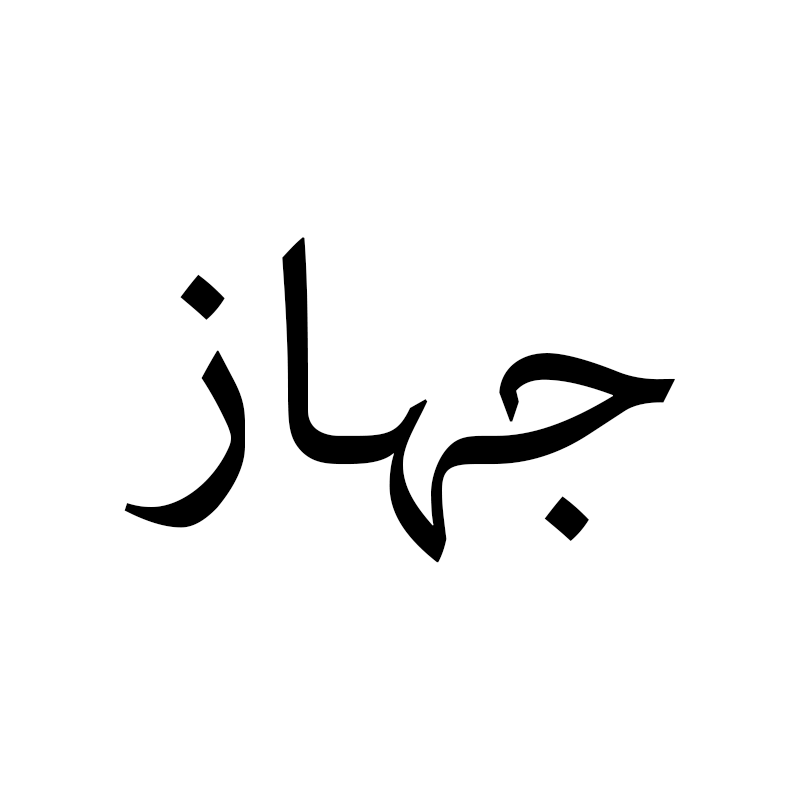
<style>
.page{position:relative;width:800px;height:800px;background:#ffffff}
.page>*{position:absolute;margin:0}
.t1{font:450px "AdobeArabic-Regular";color:#000000}
</style>
<div class="page">
<p class="t1" style="left:124px;top:237px;width:551px;height:326px">جہاز</p>
</div>
